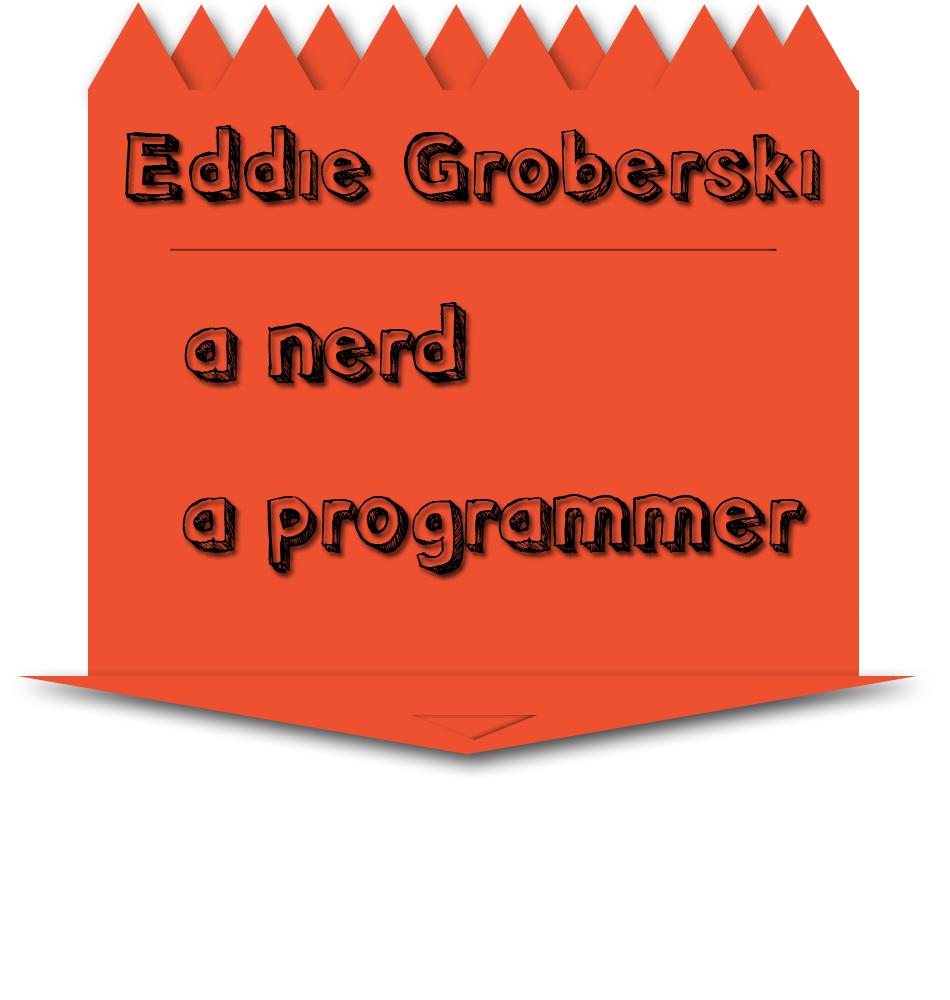
<style>
.page{position:relative;width:950px;height:1000px;background:#ee512f}
.page>*{position:absolute;margin:0}
.t1{font:100px "Pointy";color:#000000}
</style>
<div class="page">
<p class="t1" style="left:184px;top:302px;width:283px;height:81px">a nerd</p>
<p class="t1" style="left:182px;top:494px;width:625px;height:81px">a programmer</p>
</div>
